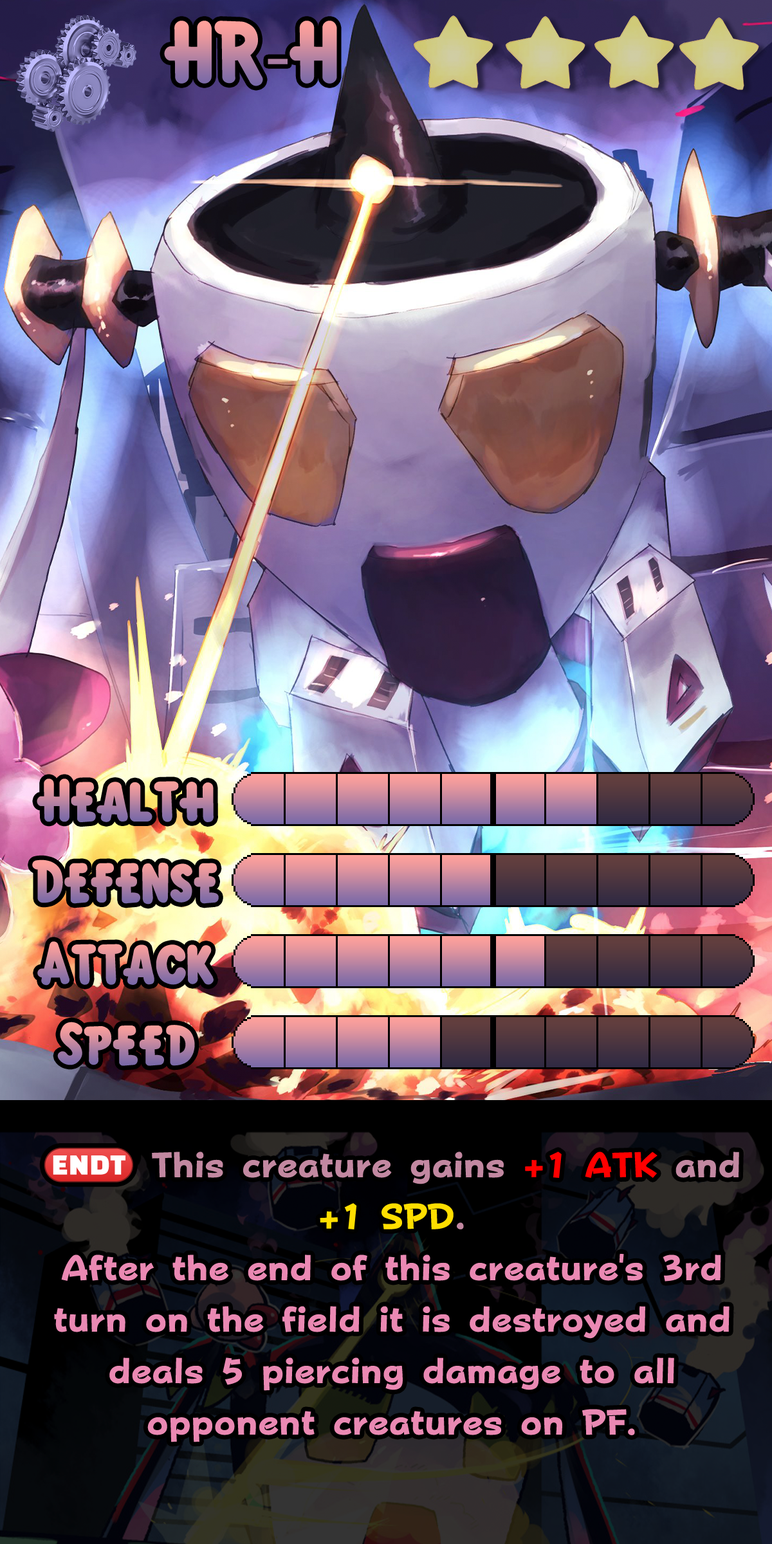
<style>
.page{position:relative;width:772px;height:1544px}
.page>*{position:absolute;margin:0}
.t1{font:135.1px "KirbyClassic"}
.t2{font:135.1px "MyriadPro-Regular"}
.t3{font:92.7px "KirbyClassic"}
.t4{font:60.5px/51.5px "FOTPopHappinessStrp-ExtraBold";color:#ea89b3}
.t5{font:60.5px/51.5px "stoogedings-Regular";color:#c288a1}
.t6{font:60.5px/51.5px "FOTPopHappinessStrp-ExtraBold";color:#c288a1}
.t7{font:60.5px/51.5px "FOTPopHappinessStrp-ExtraBold";color:#ff0000}
.t8{font:60.5px/51.5px "FOTPopHappinessStrp-ExtraBold";color:#ffde00}
</style>
<div class="page">
<p class="t1" style="left:164px;top:21px;width:173px;height:65px">HR<span class="t2">-</span>H</p>
<p class="t3" style="left:37px;top:779px;width:177px;height:44px">Health</p>
<p class="t3" style="left:32px;top:860px;width:187px;height:45px">Defense</p>
<p class="t3" style="left:37px;top:941px;width:177px;height:45px">Attack</p>
<p class="t3" style="left:57px;top:1022px;width:138px;height:44px">Speed</p>
<p class="t4" style="left:44px;top:1148px;width:695px;height:295px;text-align:center"><span class="t5">(ENDT)</span><span class="t6"> This creature gains </span><span class="t7">+1 ATK</span><span class="t6"> and </span><span class="t8">+1 SPD</span><span class="t6">.<br></span>After the end of this creature's 3rd turn on the field it is destroyed and deals 5 piercing damage to all opponent creatures on PF.</p>
</div>
